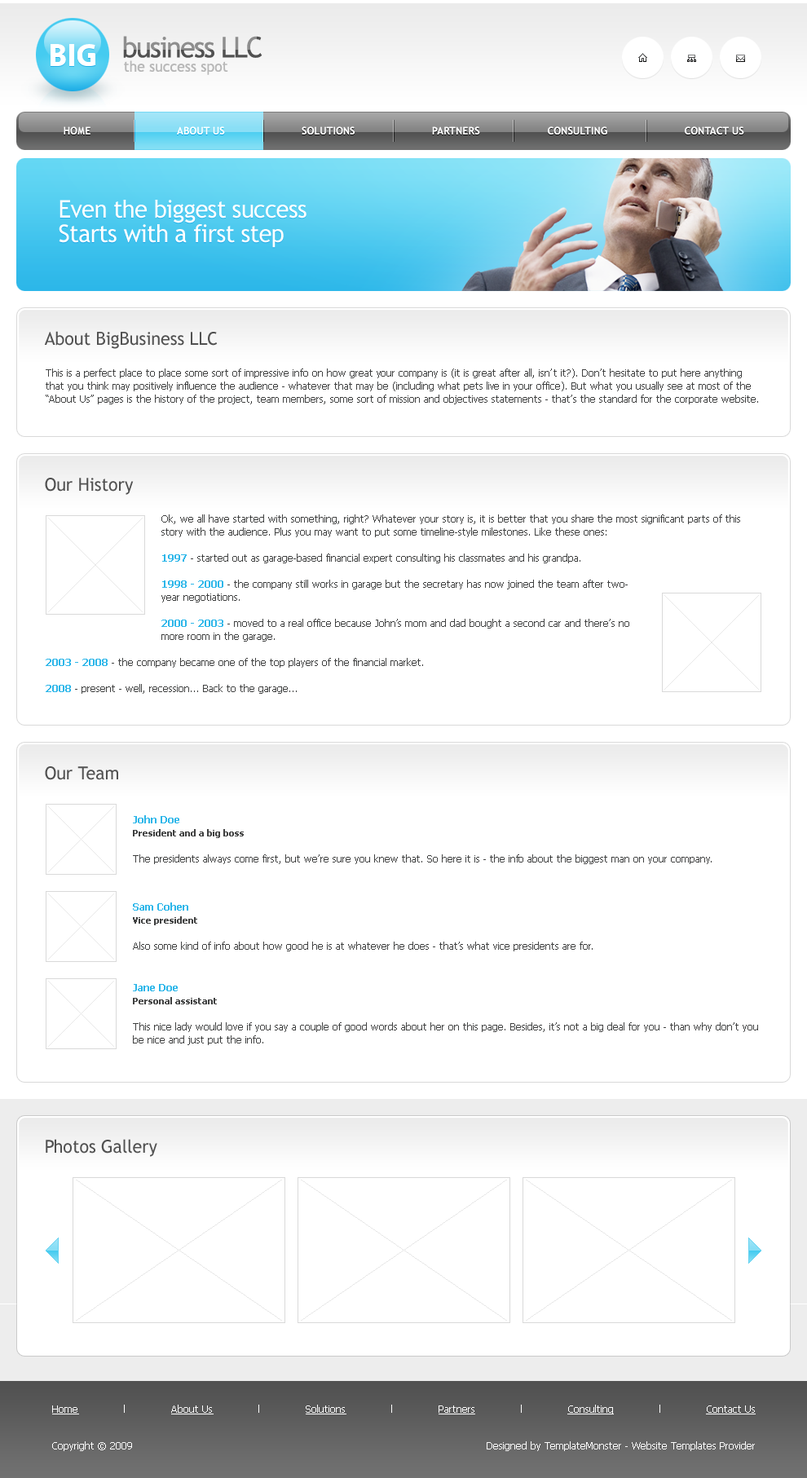
<style>
.page{position:relative;width:807px;height:1478px;background:#ffffff}
.page>*{position:absolute;margin:0}
.t1{font:28.5px "TrebuchetMS";letter-spacing:-0.05em}
.t2{font:14.7px "TrebuchetMS";color:#b7b7b7}
.t3{font:10.6px "TrebuchetMS-Bold";color:#ffffff;scale:0.96 1}
.t4{font:24.5px/24.5px "TrebuchetMS";letter-spacing:-0.025em;color:#ffffff}
.t5{font:17.9px "TrebuchetMS";color:#515151}
.t6{font:9.8px/13px "Tahoma";color:#404141}
.t7{font:9.8px/13px "Tahoma-Bold";color:#2cb6e9}
.t8{font:9px/13px "Tahoma-Bold";color:#404141}
.t9{font:9.8px "Tahoma";color:#ffffff;text-decoration:underline}
.t10{font:9.8px "Tahoma";color:#ffffff}
</style>
<div class="page">
<p class="t1" style="left:123px;top:36px;width:139px;height:22px">business LLC</p>
<p class="t2" style="left:124px;top:60px;width:104px;height:15px">the success spot</p>
<p class="t3" style="left:64px;top:126px;width:680px;height:8px">HOME                            ABOUT US                         SOLUTIONS                         PARTNERS                      CONSULTING                         CONTACT US</p>
<p class="t4" style="left:59px;top:200px;width:247px;height:48px">Even the biggest success<br>Starts with a first step</p>
<p class="t5" style="left:44px;top:331px;width:174px;height:18px">About BigBusiness LLC</p>
<p class="t6" style="left:46px;top:368px;width:712px;height:36px">This is a perfect place to place some sort of impressive info on how great your company is (it is great after all, isn’t it?). Don’t hesitate to put here anything that you think may positively influence the audience - whatever that may be (including what pets live in your office). But what you usually see at most of the “About Us” pages is the history of the project, team members, some sort of mission and objectives statements - that’s the standard for the corporate website.</p>
<p class="t5" style="left:45px;top:478px;width:89px;height:17px">Our History</p>
<p class="t6" style="left:46px;top:514px;width:694px;height:180px">Ok, we all have started with something, right? Whatever your story is, it is better that you share the most significant parts of this story with the audience. Plus you may want to put some timeline-style milestones. Like these ones:<br><br><span class="t7">1997</span> - started out as garage-based financial expert consulting his classmates and his grandpa.<br><br><span class="t7">1998 - 2000</span> - the company still works in garage but the secretary has now joined the team after two-year negotiations.<br><br><span class="t7">2000 - 2003</span> - moved to a real office because John’s mom and dad bought a second car and there’s no more room in the garage.<br><br><span class="t7">2003 - 2008</span> - the company became one of the top players of the financial market. <br><br><span class="t7">2008</span> - present - well, recession... Back to the garage...</p>
<p class="t5" style="left:45px;top:766px;width:73px;height:14px">Our Team</p>
<p class="t6" style="left:133px;top:815px;width:579px;height:49px"><span class="t7">John Doe<br></span><span class="t8">President and a big boss<br><br></span>The presidents always come first, but we’re sure you knew that. So here it is - the info about the biggest man on your company.</p>
<p class="t6" style="left:133px;top:902px;width:460px;height:49px"><span class="t7">Sam Cohen<br></span><span class="t8">Vice president<br><br></span>Also some kind of info about how good he is at whatever he does - that’s what vice presidents are for.</p>
<p class="t6" style="left:133px;top:984px;width:625px;height:61px"><span class="t7">Jane Doe<br></span><span class="t8">Personal assistant<br><br></span>This nice lady would love if you say a couple of good words about her on this page. Besides, it’s not a big deal for you - than why don’t you be nice and just put the info.</p>
<p class="t5" style="left:46px;top:1139px;width:111px;height:18px">Photos Gallery</p>
<p class="t9" style="left:52px;top:1404px;width:704px;height:10px">Home<span class="t10">              l              </span>About Us<span class="t10">              l              </span>Solutions<span class="t10">              l              </span>Partners<span class="t10">              l              </span>Consulting<span class="t10">              l              </span>Contact Us</p>
<p class="t10" style="left:52px;top:1441px;width:80px;height:10px">Copyright © 2009</p>
<p class="t10" style="left:487px;top:1441px;width:268px;height:10px">Designed by TemplateMonster - Website Templates Provider</p>
</div>
